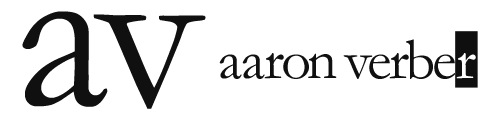
<style>
.page{position:relative;width:500px;height:120px;background:#ffffff}
.page>*{position:absolute;margin:0}
.t1{font:231px "Garamond";letter-spacing:-0.03em;color:#101010}
.t2{font:59px "Garamond";letter-spacing:-0.03em;color:#101010}
.t3{font:59px "Garamond";letter-spacing:-0.01em;color:#101010}
.t4{font:59px "Garamond";letter-spacing:-0.04em;color:#101010}
.t5{font:59px "Garamond";letter-spacing:-0.07em;color:#101010}
.t6{font:59px "Garamond";letter-spacing:-0.05em;color:#101010}
.t7{font:59px "Garamond";letter-spacing:-0.07em;color:#ffffff}
</style>
<div class="page">
<p class="t1" style="left:22px;top:11px;width:184px;height:98px">av</p>
<p class="t2" style="left:219px;top:39px;width:257px;height:40px"><span class="t3">a</span>ar<span class="t4">o</span><span class="t5">n </span><span class="t6">v</span>e<span class="t6">r</span>b<span class="t3">e</span><span class="t7">r</span></p>
</div>
